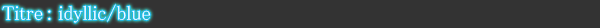
<style>
.page{position:relative;width:600px;height:28px;background:#333333}
.page>*{position:absolute;margin:0}
.t1{font:20px "MS-PMincho";color:#ffffff}
</style>
<div class="page">
<p class="t1" style="left:2px;top:4px;width:149px;height:19px">Titre : idyllic/blue</p>
</div>
